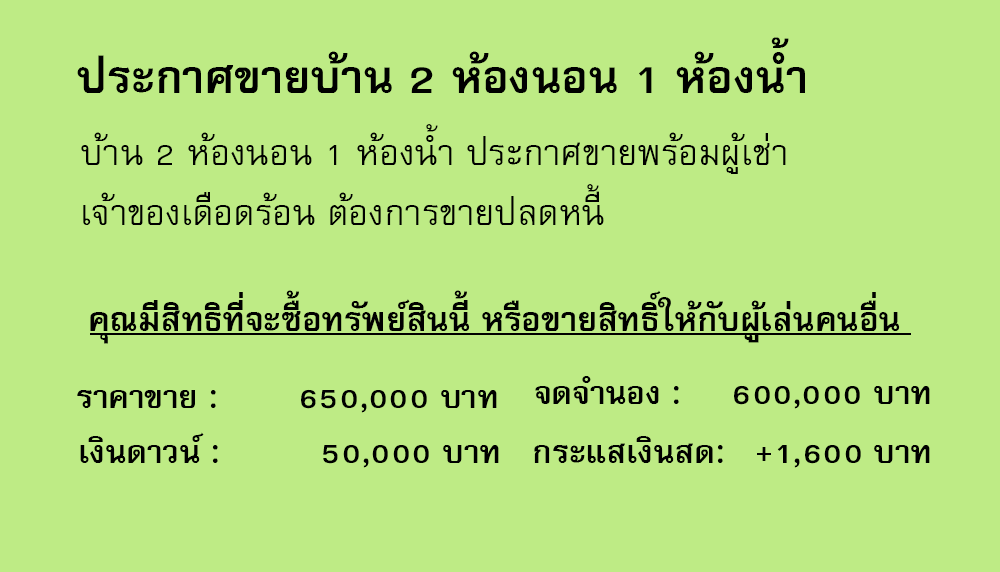
<style>
.page{position:relative;width:1000px;height:572px;background:#beeb85}
.page>*{position:absolute;margin:0}
.t1{font:64px "FreesiaUPCBold";color:#000000}
.t2{font:50px/60px "FreesiaUPC";color:#000000}
.t3{font:47px "FreesiaUPCBold";color:#000000}
.t4{font:45px "FreesiaUPCBold";color:#000000}
</style>
<div class="page">
<p class="t1" style="left:77px;top:37px;width:728px;height:56px">ประกาศขายบ้าน 2 ห้องนอน 1 ห้องน้ำ</p>
<p class="t2" style="left:81px;top:124px;width:705px;height:101px">บ้าน 2 ห้องนอน 1 ห้องน้ำ ประกาศขายพร้อมผู้เช่า<br>เจ้าของเดือดร้อน ต้องการขายปลดหนี้</p>
<p class="t3" style="left:90px;top:290px;width:810px;height:54px">คุณมีสิทธิที่จะซื้อทรัพย์สินนี้ หรือขายสิทธิ์ให้กับผู้เล่นคนอื่น</p>
<p class="t4" style="left:535px;top:376px;width:395px;height:33px">จดจำนอง :     600,000 บาท</p>
<p class="t4" style="left:77px;top:389px;width:420px;height:24px">ราคาขาย :        650,000 บาท</p>
<p class="t4" style="left:80px;top:432px;width:419px;height:36px">เงินดาวน์ :          50,000 บาท</p>
<p class="t4" style="left:534px;top:436px;width:396px;height:32px">กระแสเงินสด:   +1,600 บาท</p>
</div>
